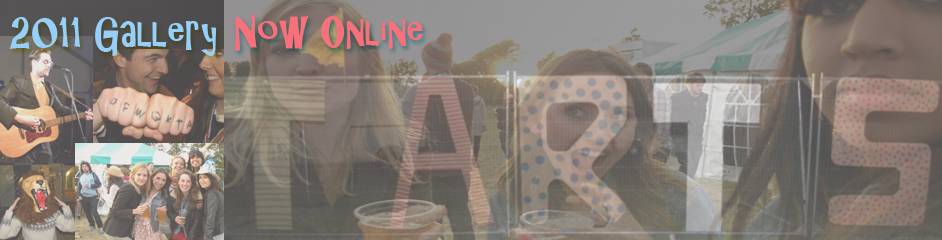
<style>
.page{position:relative;width:942px;height:240px}
.page>*{position:absolute;margin:0}
.t1{font:40px "ARCHRISTY";color:#96cff9}
.t2{font:40px "ARCHRISTY";color:#f7707a}
</style>
<div class="page">
<p class="t1" style="left:10px;top:17px;width:207px;height:39px">2011 Gallery</p>
<p class="t2" style="left:235px;top:15px;width:188px;height:36px">Now Online</p>
</div>
